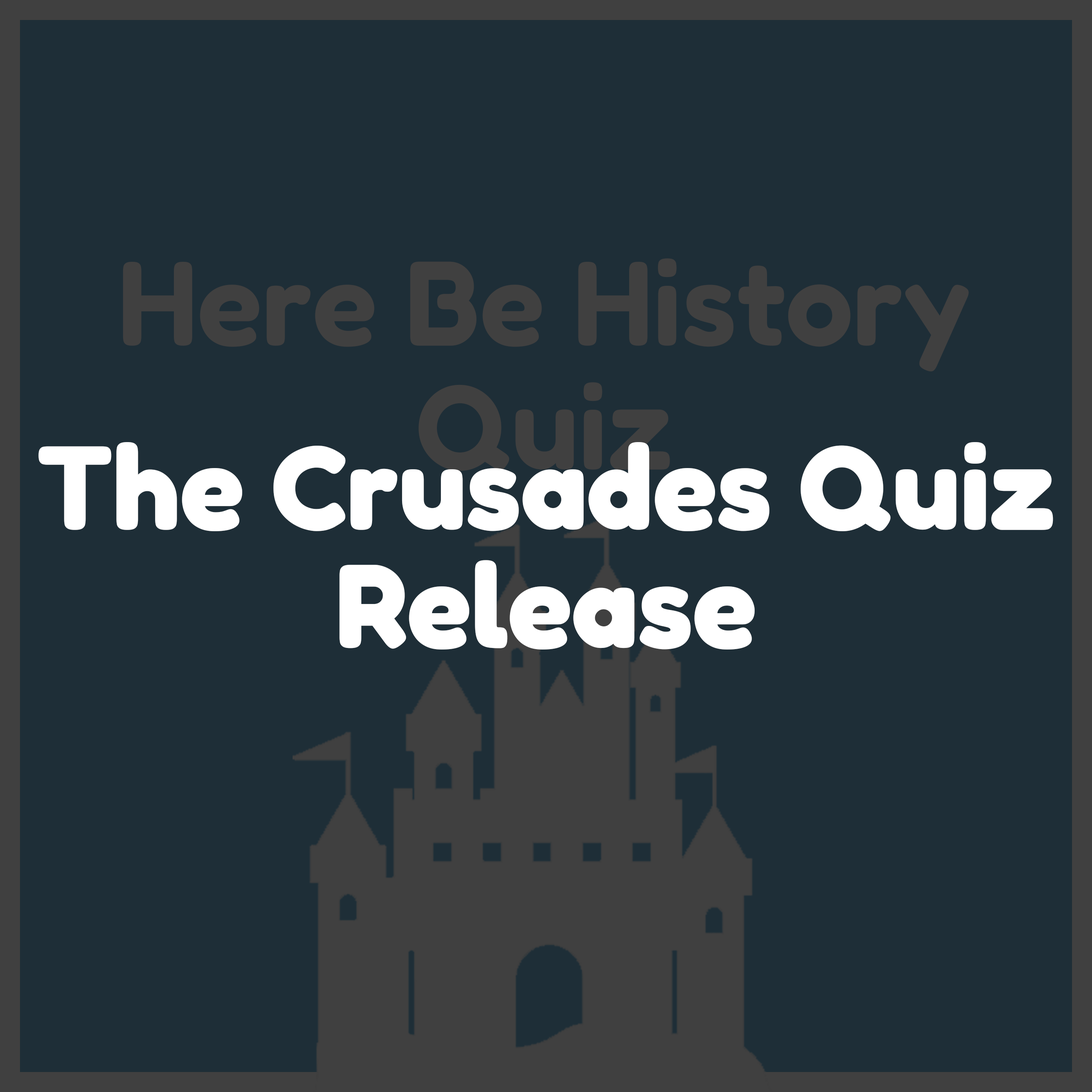
<style>
.page{position:relative;width:1092px;height:1092px;background:#1e2e37}
.page>*{position:absolute;margin:0}
.t1{font:119.1px/10.7px "Fredoka-Bold";color:#ffffff}
</style>
<div class="page">
<p class="t1" style="left:38px;top:442px;width:1015px;height:208px;text-align:center">The Crusades Quiz<br><br><br><br><br><br><br><br><br><br><br>Release</p>
</div>
